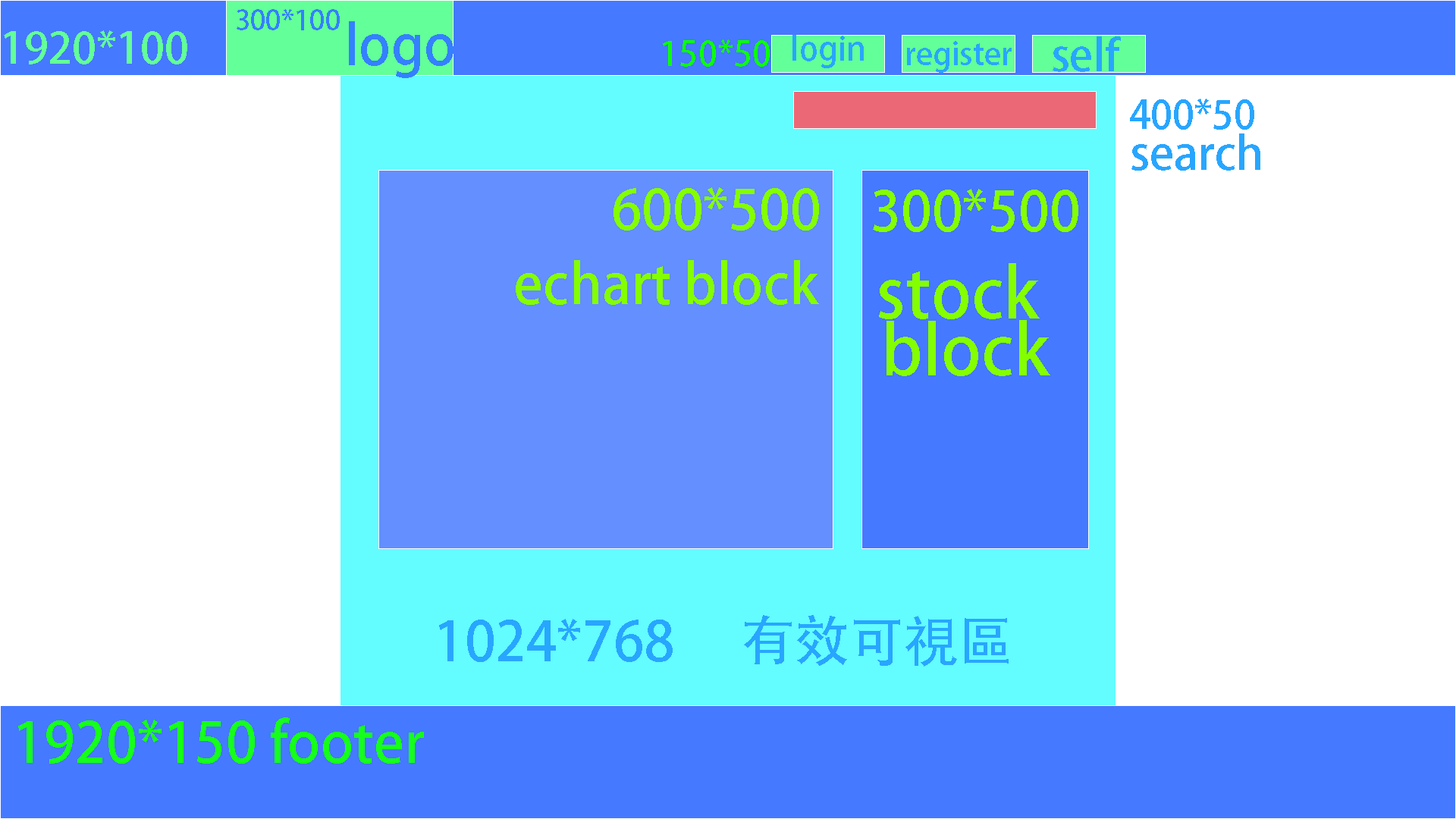
<style>
.page{position:relative;width:1456px;height:819px;background:#ffffff}
.page>*{position:absolute;margin:0}
.t1{font:27.5px "AdobeHeitiStd-Regular";color:#3480ff}
.t2{font:54.6px "AdobeHeitiStd-Regular";color:#3480ff}
.t3{font:42.8px "AdobeHeitiStd-Regular";color:#63ff99}
.t4{font:33.9px "AdobeHeitiStd-Regular";color:#0cff0c}
.t5{font:32.4px "AdobeHeitiStd-Regular";color:#28a6ff}
.t6{font:31px "AdobeHeitiStd-Regular";color:#28a6ff}
.t7{font:43.4px "AdobeHeitiStd-Regular";color:#28a6ff}
.t8{font:38.5px "AdobeHeitiStd-Regular";color:#28a6ff}
.t9{font:45.4px "AdobeHeitiStd-Regular";color:#28a6ff}
.t10{font:54.6px "AdobeHeitiStd-Regular";color:#84ff00}
.t11{font:68.2px/19px "AdobeHeitiStd-Regular";color:#84ff00}
.t12{font:54.6px "AdobeHeitiStd-Regular";color:#28a6ff}
.t13{font:55.5px "AdobeHeitiStd-Regular";color:#16ff1b}
</style>
<div class="page">
<p class="t1" style="left:237px;top:9px;width:103px;height:21px">300*100</p>
<p class="t2" style="left:349px;top:21px;width:104px;height:57px">logo</p>
<p class="t3" style="left:4px;top:30px;width:183px;height:34px">1920*100</p>
<p class="t4" style="left:663px;top:39px;width:107px;height:28px">150*50</p>
<p class="t5" style="left:792px;top:35px;width:72px;height:33px">login</p>
<p class="t6" style="left:907px;top:41px;width:105px;height:32px">register</p>
<p class="t7" style="left:1053px;top:36px;width:68px;height:36px">self</p>
<p class="t8" style="left:1130px;top:99px;width:124px;height:31px">400*50</p>
<p class="t9" style="left:1131px;top:133px;width:129px;height:38px">search</p>
<p class="t10" style="left:613px;top:187px;width:206px;height:44px">600*500</p>
<p class="t10" style="left:873px;top:189px;width:205px;height:43px">300*500</p>
<p class="t10" style="left:516px;top:260px;width:303px;height:45px">echart block</p>
<p class="t11" style="left:879px;top:263px;width:171px;height:113px;text-align:center">stock <br><br><br>block</p>
<p class="t12" style="left:744px;top:615px;width:265px;height:52px">有效可視區</p>
<p class="t12" style="left:439px;top:619px;width:234px;height:43px">1024*768</p>
<p class="t13" style="left:18px;top:717px;width:406px;height:47px">1920*150 footer</p>
</div>
